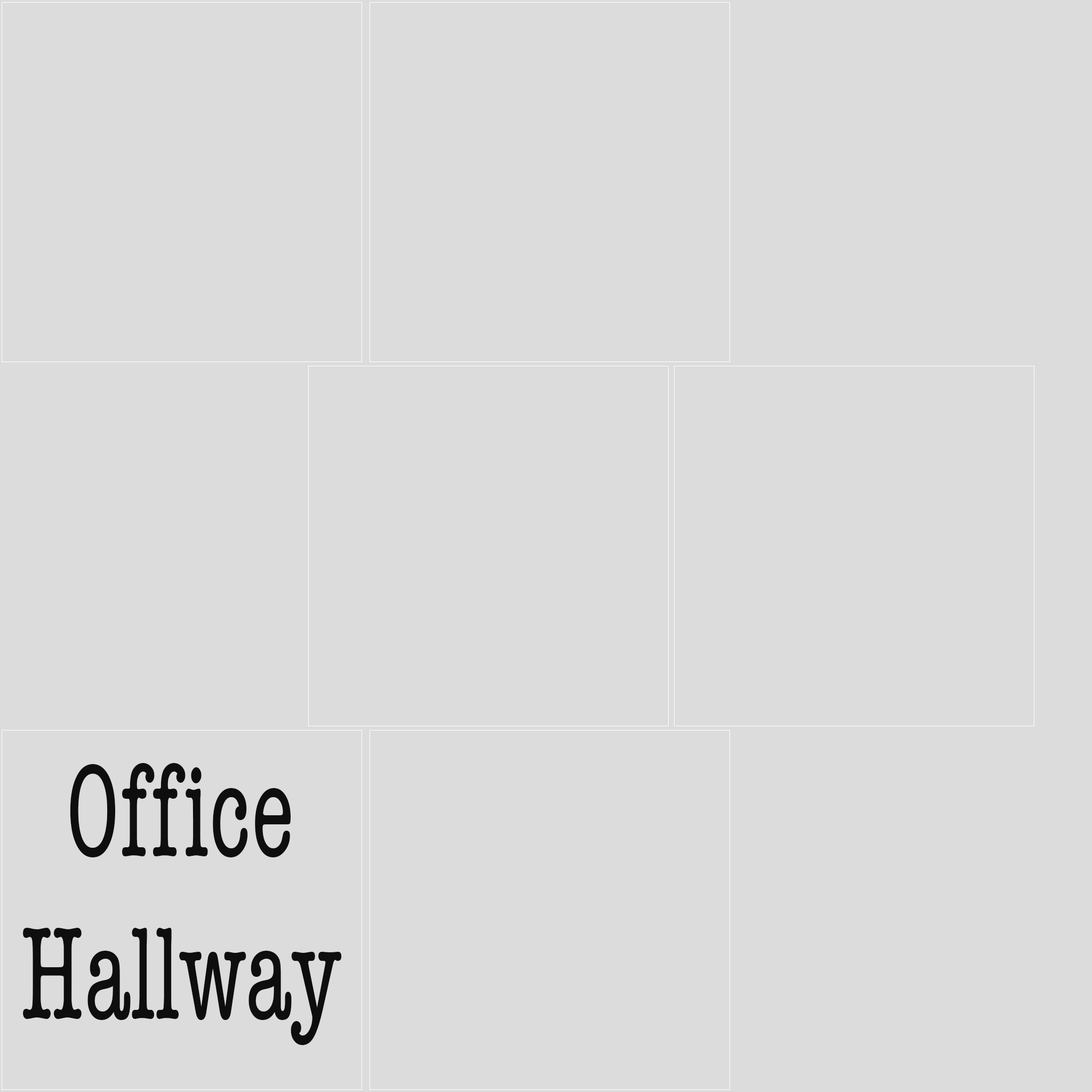
<style>
.page{position:relative;width:1092px;height:1092px;background:#dcdcdc}
.page>*{position:absolute;margin:0}
.t1{font:135.1px "AmericanTypewriter-Condensed";color:#0e0e0e;scale:0.77 1}
</style>
<div class="page">
<p class="t1" style="left:23px;top:763px;width:319px;height:282px;text-align:center">Office<br>Hallway</p>
</div>
